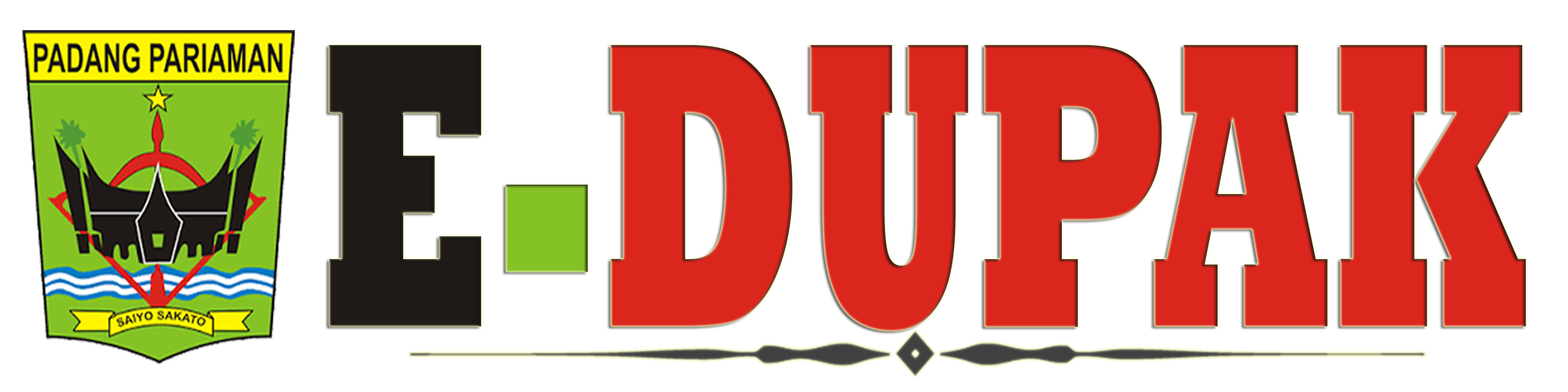
<style>
.page{position:relative;width:1568px;height:392px;background:#ffffff}
.page>*{position:absolute;margin:0}
.t1{font:414.6px "Rockwell-ExtraBold";color:#db261d;scale:0.56 1}
.t2{font:414.6px "Rockwell-ExtraBold";color:#1f1a17;scale:0.56 1}
.t3{font:414.6px "Rockwell-ExtraBold";color:#84c225;scale:0.56 1}
</style>
<div class="page">
<p class="t1" style="left:329px;top:45px;width:1197px;height:286px"><span class="t2">E</span><span class="t3">-</span>DUPAK</p>
</div>
